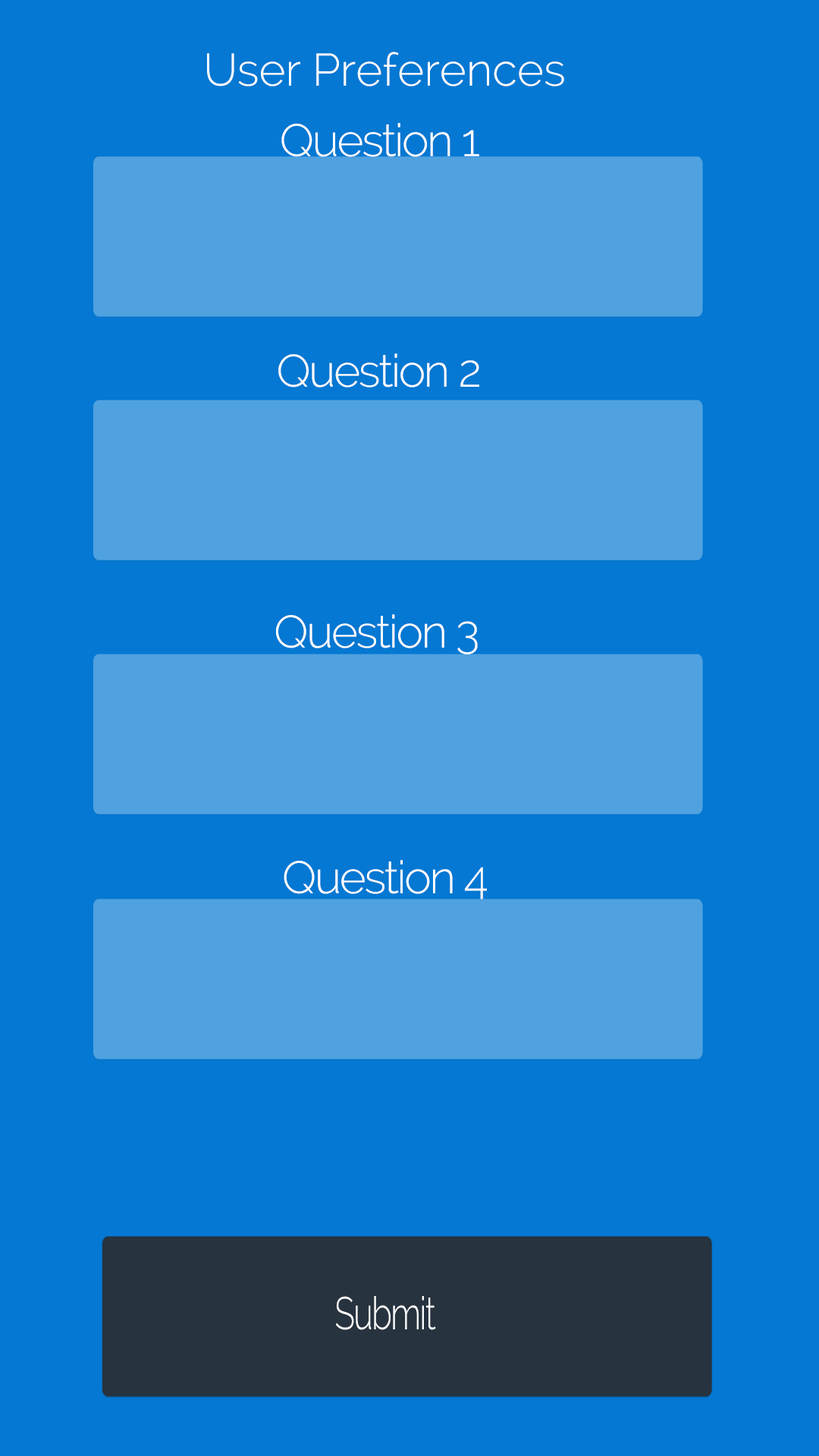
<style>
.page{position:relative;width:819px;height:1456px;background:#0478d2}
.page>*{position:absolute;margin:0}
.t1{font:45.5px "Raleway-Light";color:#ffffff}
.t2{font:45.5px "Raleway-Light";letter-spacing:-0.04em;color:#ffffff}
.t3{font:45.5px "Raleway-Light";letter-spacing:-0.04em;color:#ffffff;scale:0.73 1}
</style>
<div class="page">
<p class="t1" style="left:207px;top:52px;width:357px;height:34px">User Preferences</p>
<p class="t2" style="left:281px;top:123px;width:198px;height:34px">Question 1</p>
<p class="t2" style="left:278px;top:353px;width:201px;height:35px">Question 2</p>
<p class="t2" style="left:276px;top:614px;width:202px;height:40px">Question 3</p>
<p class="t2" style="left:284px;top:860px;width:203px;height:39px">Question 4</p>
<p class="t3" style="left:336px;top:1296px;width:100px;height:34px">Submit</p>
</div>
